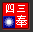
<style>
.page{position:relative;width:33px;height:32px;background:#f20000}
.page>*{position:absolute;margin:0}
.t1{font:10.4px "SimSun";color:#ffffff}
.t2{font:11.7px "SimSun";color:#ffffff}
</style>
<div class="page">
<p class="t1" style="left:6px;top:4px;width:19px;height:9px">四三</p>
<p class="t2" style="left:16px;top:15px;width:11px;height:12px">奉</p>
</div>
